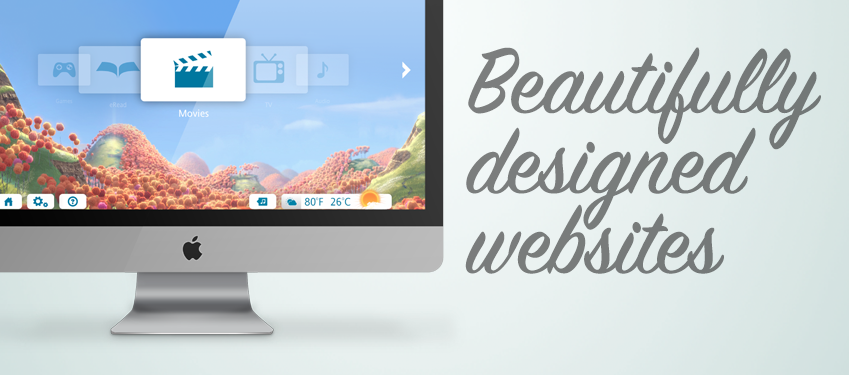
<style>
.page{position:relative;width:849px;height:375px}
.page>*{position:absolute;margin:0}
.t1{font:102.1px/80.1px "SignPainter-HouseScript";color:#787c7b}
</style>
<div class="page">
<p class="t1" style="left:465px;top:47px;width:356px;height:227px">Beautifully<br>designed<br>websites</p>
</div>
